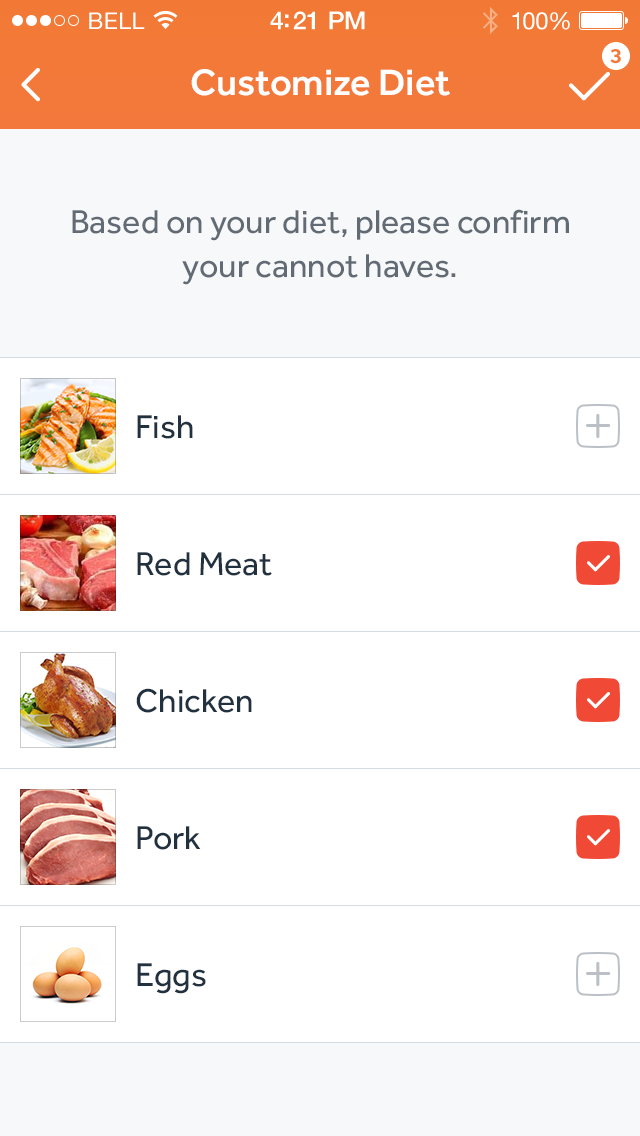
<style>
.page{position:relative;width:640px;height:1136px;background:#ffffff}
.page>*{position:absolute;margin:0}
.t1{font:23px "HelveticaNeue";letter-spacing:0.02em;color:#ffffff}
.t2{font:25px "HelveticaNeue-Medium";letter-spacing:-0.02em;color:#ffffff}
.t3{font:24px "HelveticaNeue";letter-spacing:-0.02em;color:#ffffff}
.t4{font:20px "Gibson-SemiBold";color:#f27939}
.t5{font:38px "Effra-Medium";color:#ffffff}
.t6{font:34px/44px "Effra-Regular";color:#626a73}
.t7{font:34px "Effra-Regular";color:#22313f}
</style>
<div class="page">
<p class="t1" style="left:89px;top:12px;width:56px;height:17px">BELL</p>
<p class="t1" style="left:89px;top:12px;width:56px;height:17px">BELL</p>
<p class="t2" style="left:270px;top:11px;width:95px;height:19px">4:21 PM</p>
<p class="t2" style="left:270px;top:11px;width:95px;height:19px">4:21 PM</p>
<p class="t3" style="left:512px;top:12px;width:58px;height:18px">100%</p>
<p class="t3" style="left:512px;top:12px;width:58px;height:18px">100%</p>
<p class="t4" style="left:610px;top:49px;width:11px;height:15px">3</p>
<p class="t5" style="left:191px;top:69px;width:259px;height:27px">Customize Diet</p>
<p class="t6" style="left:72px;top:209px;width:497px;height:76px;text-align:center">Based on your diet, please confirm <br>your cannot haves.</p>
<p class="t7" style="left:137px;top:415px;width:56px;height:24px">Fish</p>
<p class="t7" style="left:137px;top:552px;width:135px;height:24px">Red Meat</p>
<p class="t7" style="left:136px;top:688px;width:116px;height:25px">Chicken</p>
<p class="t7" style="left:137px;top:826px;width:64px;height:24px">Pork</p>
<p class="t7" style="left:137px;top:963px;width:69px;height:31px">Eggs</p>
</div>
